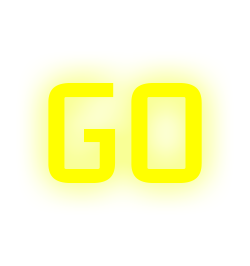
<style>
.page{position:relative;width:250px;height:266px;background:#ffffff}
.page>*{position:absolute;margin:0}
.t1{font:125px "KdamThmorPro-Regular";color:#ffff00}
</style>
<div class="page">
<p class="t1" style="left:48px;top:83px;width:154px;height:100px">GO</p>
</div>
